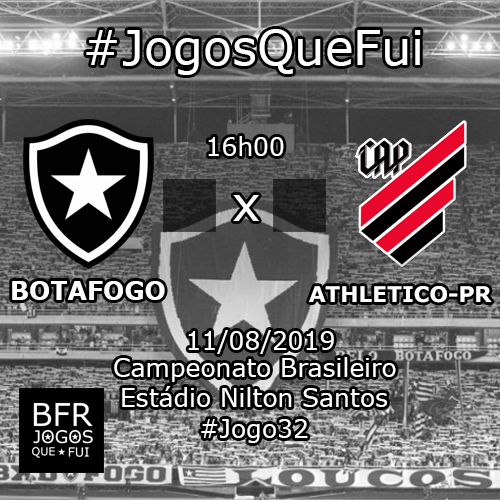
<style>
.page{position:relative;width:500px;height:500px}
.page>*{position:absolute;margin:0}
.t1{font:48px "Verdana";color:#ffffff}
.t2{font:25px "Verdana";color:#ffffff}
.t3{font:25px "Verdana-Bold";color:#ffffff}
.t4{font:21.6px "Verdana-Bold";color:#ffffff}
</style>
<div class="page">
<p class="t1" style="left:86px;top:29px;width:335px;height:46px">#JogosQueFui</p>
<p class="t2" style="left:208px;top:136px;width:76px;height:20px">16h00</p>
<p class="t1" style="left:233px;top:195px;width:26px;height:26px">x</p>
<p class="t3" style="left:12px;top:281px;width:153px;height:19px">BOTAFOGO</p>
<p class="t4" style="left:309px;top:286px;width:183px;height:17px">ATHLETICO-PR</p>
<p class="t2" style="left:188px;top:330px;width:146px;height:24px">11/08/2019</p>
<p class="t2" style="left:114px;top:357px;width:282px;height:25px">Campeonato Brasileiro</p>
<p class="t2" style="left:122px;top:386px;width:265px;height:21px">Estádio Nilton Santos</p>
<p class="t2" style="left:201px;top:419px;width:107px;height:24px">#Jogo32</p>
</div>
